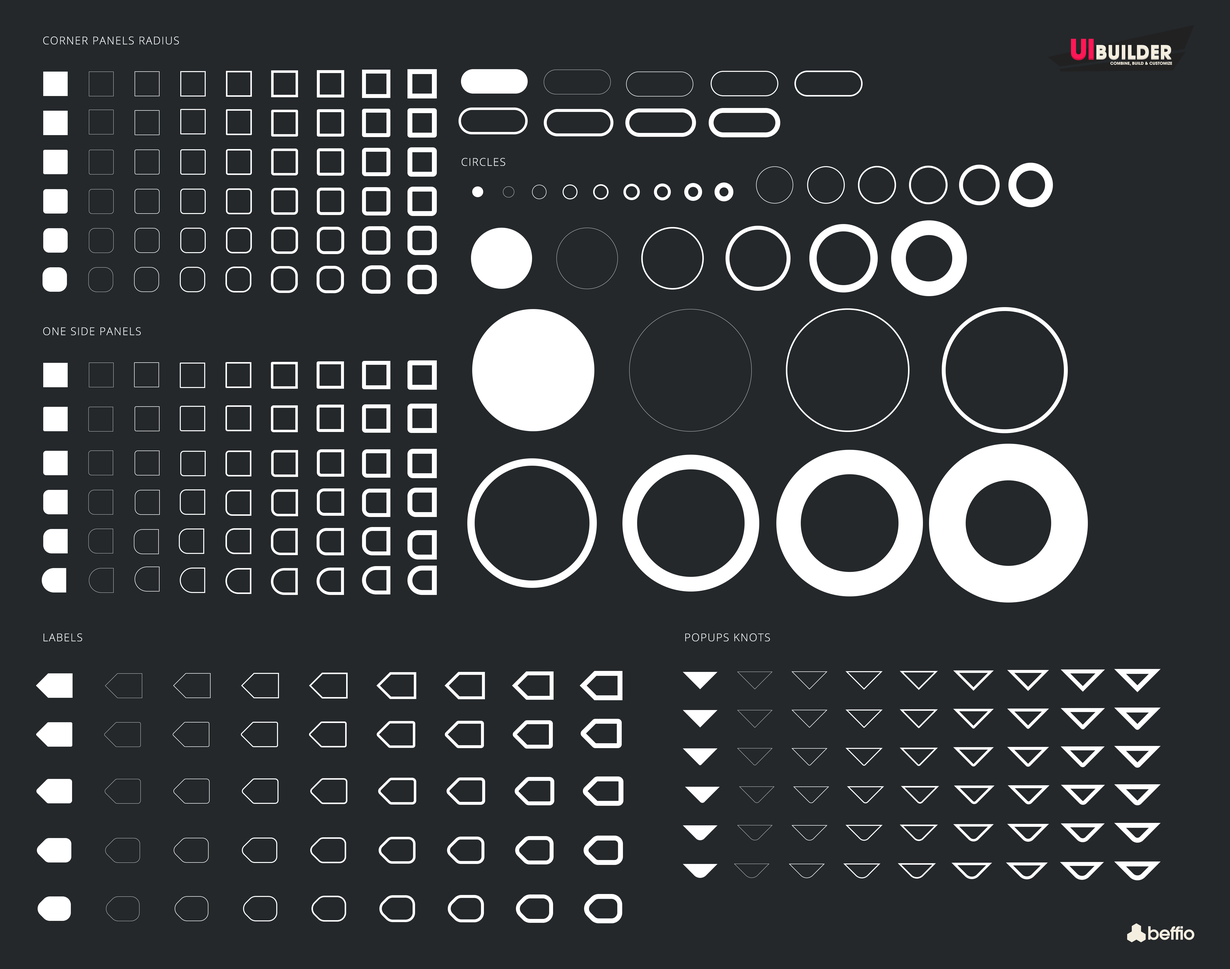
<style>
.page{position:relative;width:1230px;height:969px;background:#24282b}
.page>*{position:absolute;margin:0}
.t1{font:10.8px "OpenSans-Light";letter-spacing:0.075em;color:#ffffff;text-transform:uppercase}
</style>
<div class="page">
<p class="t1" style="left:43px;top:36px;width:136px;height:8px">Corner panels RADIUS</p>
<p class="t1" style="left:462px;top:158px;width:43px;height:8px">Circles</p>
<p class="t1" style="left:43px;top:327px;width:98px;height:8px">One Side Panels</p>
<p class="t1" style="left:43px;top:633px;width:39px;height:8px">Labels</p>
<p class="t1" style="left:685px;top:633px;width:85px;height:8px">POPUPS KNOTS</p>
</div>
